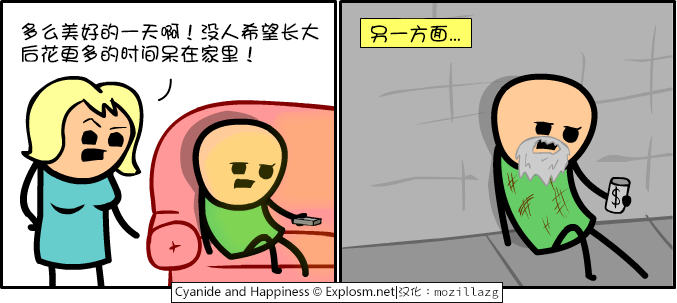
<style>
.page{position:relative;width:677px;height:303px;background:#b3b3b3}
.page>*{position:absolute;margin:0}
.t1{font:20px/22px "DFGirl";color:#000000}
.t2{font:20px "DFGirl";color:#000000}
</style>
<div class="page">
<p class="t1" style="left:21px;top:22px;width:298px;height:41px">多么美好的一天啊！没人希望长大<br>后花更多的时间呆在家里！</p>
<p class="t2" style="left:371px;top:25px;width:89px;height:18px">另一方面...</p>
</div>
